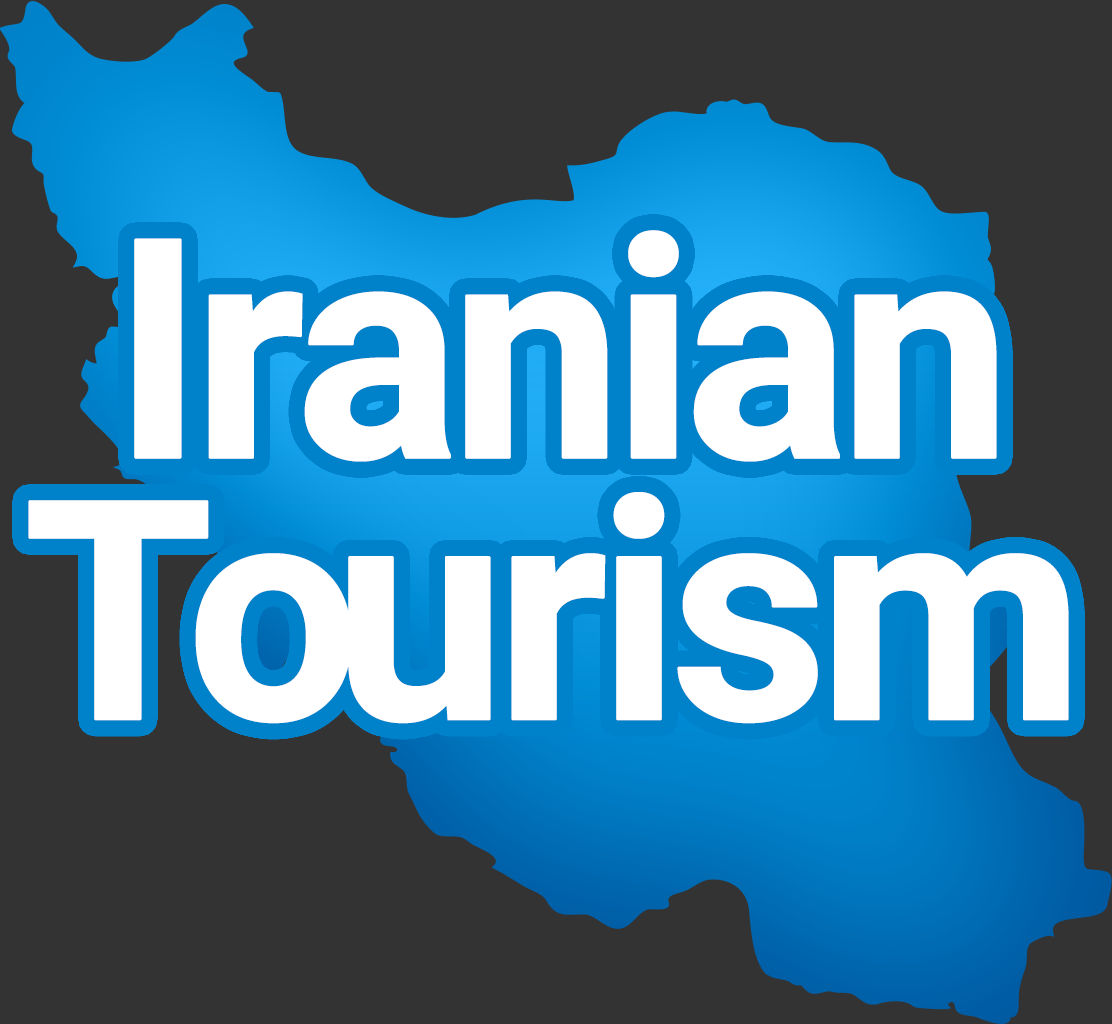
<style>
.page{position:relative;width:1112px;height:1024px;background:#333333}
.page>*{position:absolute;margin:0}
.t1{font:284.5px/261.7px "IRANSansWeb-Bold";letter-spacing:-0.06em;color:#ffffff;font-weight:bold}
.t2{font:284.5px/261.7px "IRANSansWeb-Bold";letter-spacing:-0.12em;color:#ffffff;font-weight:bold}
</style>
<div class="page">
<p class="t1" style="left:28px;top:230px;width:1041px;height:494px;text-align:center">Iranian<br><span class="t2">To</span>urism</p>
</div>
